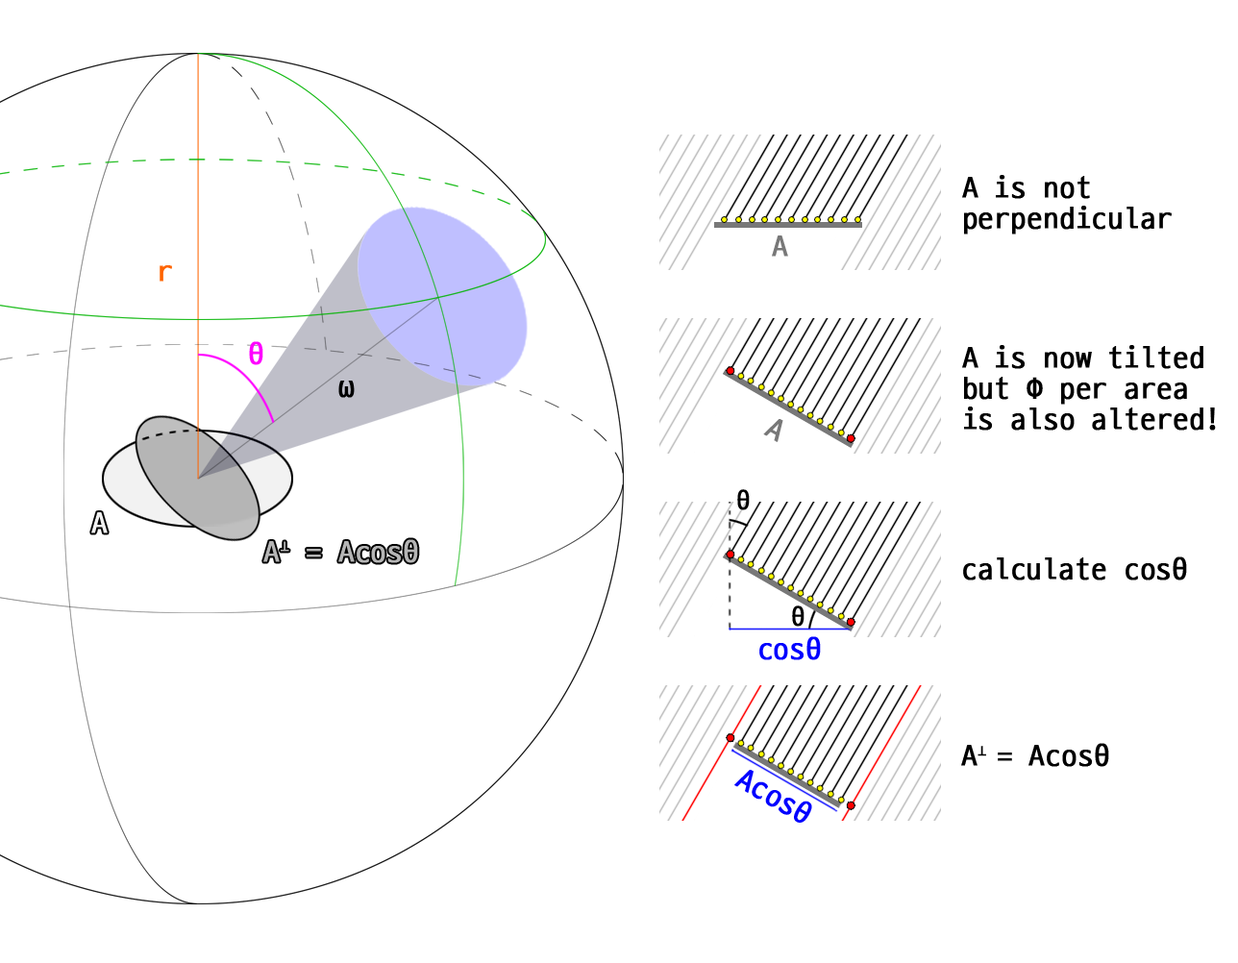
<style>
.page{position:relative;width:1238px;height:963px;background:#ffffff}
.page>*{position:absolute;margin:0}
.t1{font:30.8px/30.8px "D2Coding";color:#000000;font-weight:bold}
.t2{font:30.8px "D2Coding";color:#787878;font-weight:bold}
.t3{font:30.8px "D2Coding";color:#ff6400;font-weight:bold}
.t4{font:30.8px "D2Coding";color:#ff00ff;font-weight:bold}
.t5{font:30.8px "D2Coding";color:#000000;font-weight:bold}
.t6{font:46.1px "D2Coding";color:#000000;font-weight:bold}
.t7{font:30.8px "D2Coding";color:#f2f2f2;font-weight:bold}
.t8{font:30.8px "D2Coding";color:#0000ff;font-weight:bold}
</style>
<div class="page">
<p class="t1" style="left:962px;top:175px;width:210px;height:60px">A is not<br>perpendicular</p>
<p class="t2" style="left:772px;top:236px;width:16px;height:21px">A</p>
<p class="t3" style="left:160px;top:265px;width:12px;height:17px">r</p>
<p class="t4" style="left:249px;top:341px;width:14px;height:24px">θ</p>
<p class="t1" style="left:962px;top:345px;width:254px;height:86px">A is now tilted<br>but Φ per area<br>is also altered!</p>
<p class="t5" style="left:338px;top:381px;width:17px;height:17px">ω</p>
<p class="t2" style="left:763px;top:419px;width:20px;height:23px;rotate:30deg">A</p>
<p class="t6" style="left:737px;top:489px;width:13px;height:21px">θ</p>
<p class="t7" style="left:91px;top:512px;width:17px;height:21px">A</p>
<p class="t5" style="left:963px;top:557px;width:224px;height:24px">calculate cosθ</p>
<p class="t6" style="left:792px;top:606px;width:13px;height:21px">θ</p>
<p class="t8" style="left:759px;top:636px;width:62px;height:24px">cosθ</p>
<p class="t5" style="left:961px;top:743px;width:148px;height:24px">A⟂ = Acosθ</p>
<p class="t8" style="left:734px;top:770px;width:78px;height:53px;rotate:30deg">Acosθ</p>
</div>
